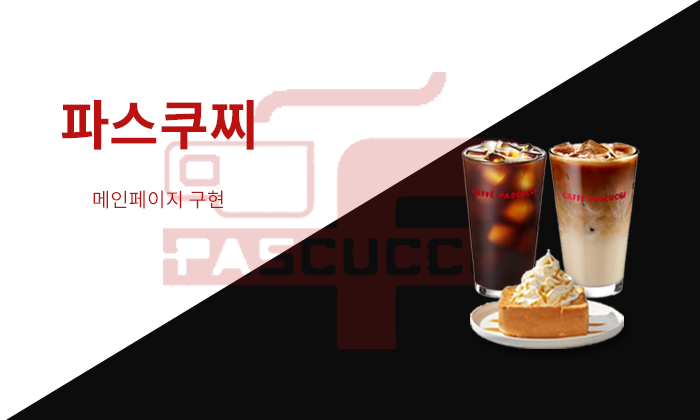
<style>
.page{position:relative;width:700px;height:420px;background:#ffffff}
.page>*{position:absolute;margin:0}
.t1{font:54px "NotoSansKR-Bold";color:#bc1111}
.t2{font:20px "NotoSansKR-Regular";color:#bc1111}
</style>
<div class="page">
<p class="t1" style="left:61px;top:100px;width:193px;height:50px">파스쿠찌</p>
<p class="t2" style="left:93px;top:190px;width:130px;height:19px">메인페이지 구현</p>
</div>
